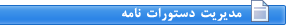
<style>
.page{position:relative;width:286px;height:25px;background:#ffffff}
.page>*{position:absolute;margin:0}
.t1{font:15px "BNazaninBold";letter-spacing:0.025em;color:#ffffff}
</style>
<div class="page">
<p class="t1" style="left:122px;top:7px;width:120px;height:14px">مدیریت دستورات نامه</p>
</div>
